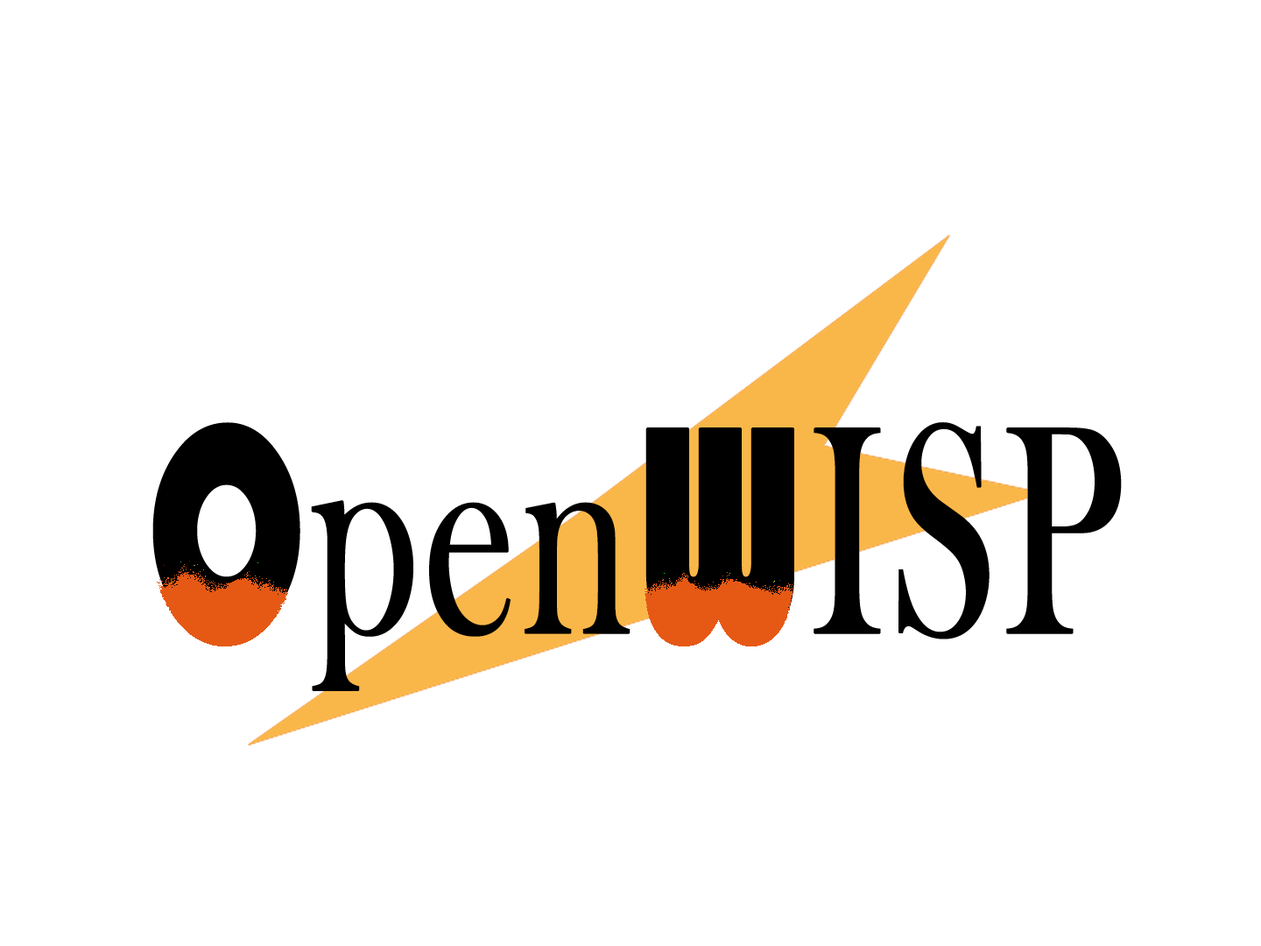
<style>
.page{position:relative;width:1261px;height:946px;background:#ffffff}
.page>*{position:absolute;margin:0}
.t1{font:306.5px "BaskOldFace";color:#000000;font-weight:bold;scale:0.68 1}
.t2{font:306.5px "Bauhaus93";color:#000000;font-weight:bold;scale:0.68 1}
</style>
<div class="page">
<p class="t1" style="left:152px;top:422px;width:970px;height:269px"><span class="t2">  O</span>pen<span class="t2">W</span>ISP</p>
</div>
